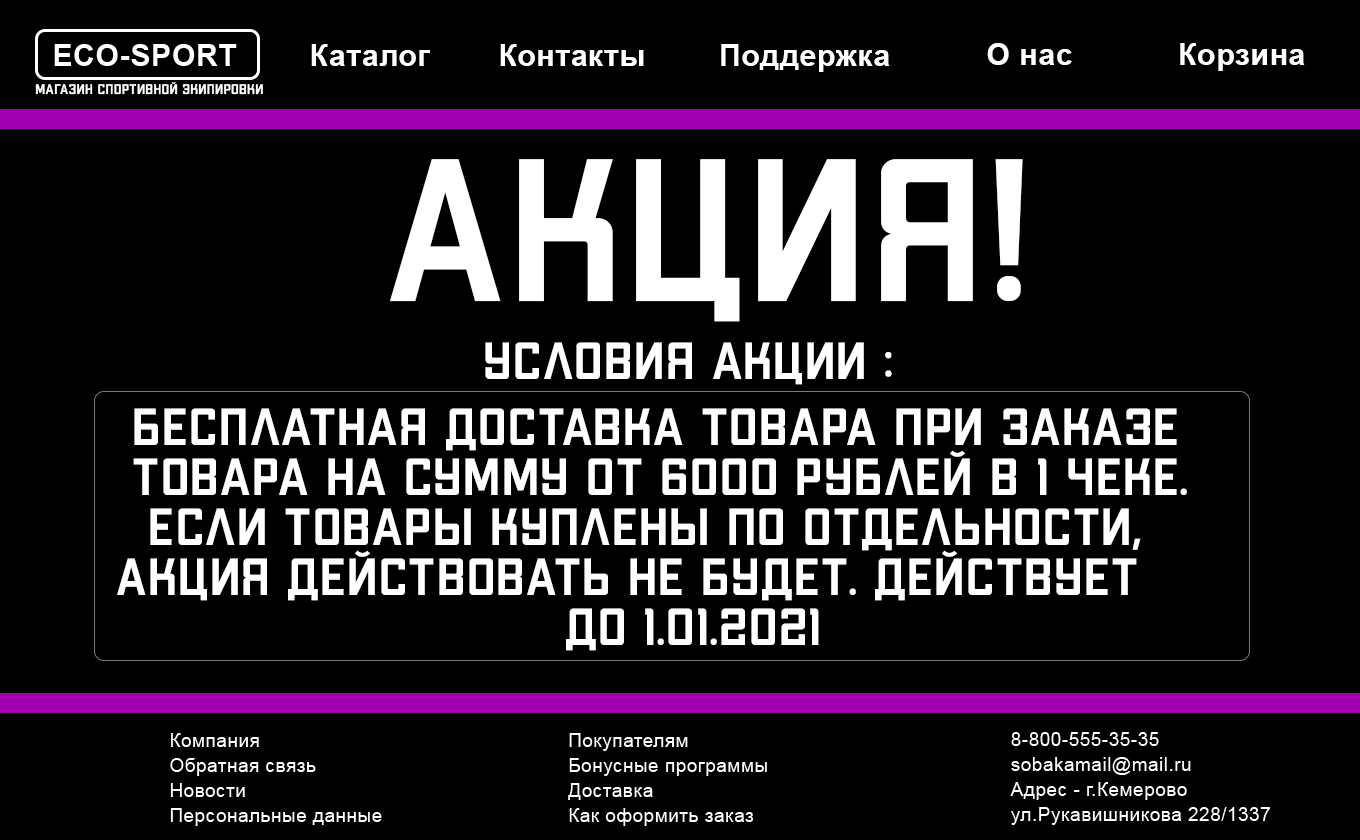
<style>
.page{position:relative;width:1360px;height:840px;background:#000000}
.page>*{position:absolute;margin:0}
.t1{font:30px "Arial-BoldMT";letter-spacing:0.025em;color:#ffffff}
.t2{font:14px "mr_ApexMk3-Medium";letter-spacing:0.025em;color:#ffffff}
.t3{font:202.6px "mr_ApexMk3-Medium";letter-spacing:0.025em;color:#ffffff}
.t4{font:52.1px "mr_ApexMk3-Medium";letter-spacing:0.025em;color:#ffffff}
.t5{font:52.1px/25px "mr_ApexMk3-Medium";letter-spacing:0.025em;color:#ffffff}
</style>
<div class="page">
<p class="t1" style="left:311px;top:44px;width:119px;height:22px">Каталог</p>
<p class="t1" style="left:500px;top:44px;width:144px;height:22px">Контакты</p>
<p class="t1" style="left:721px;top:44px;width:169px;height:28px">Поддержка</p>
<p class="t1" style="left:987px;top:43px;width:85px;height:22px">О нас</p>
<p class="t1" style="left:1180px;top:43px;width:125px;height:28px">Корзина</p>
<p class="t2" style="left:35px;top:82px;width:228px;height:13px">магазин спортивной экипировки</p>
<p class="t3" style="left:390px;top:159px;width:633px;height:163px">АКЦИЯ!</p>
<p class="t4" style="left:485px;top:342px;width:407px;height:43px">условия акции :</p>
<p class="t5" style="left:117px;top:408px;width:1070px;height:243px">бесплатная доставка товара при заказе <br><br> товара на сумму от 6000 рублей в 1 чеке.<br><br>  Если товары куплены по отдельности,<br>  <br>акция действовать не будет. Действует<br><br>                            до 1.01.2021</p>
</div>
